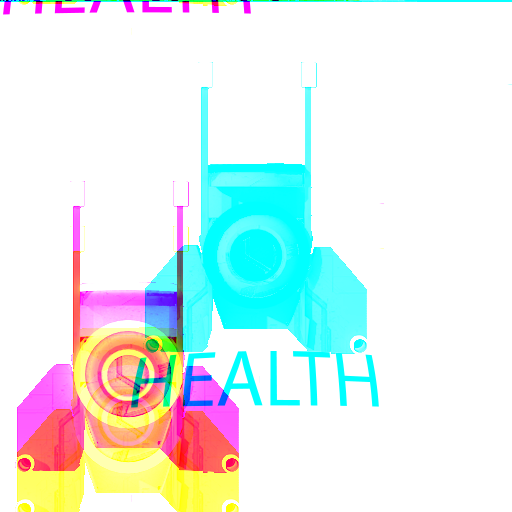
<style>
.page{position:relative;width:512px;height:512px;background:#ffffff}
.page>*{position:absolute;margin:0}
.t1{font:72px "MyriadPro-Regular"}
</style>
<div class="page">
<p class="t1" style="left:131px;top:349px;width:248px;height:57px">HEALTH</p>
</div>
